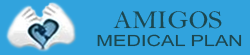
<style>
.page{position:relative;width:250px;height:55px;background:#31a3dd}
.page>*{position:absolute;margin:0}
.t1{font:25.7px "BellMT";color:#1c474f;scale:1.06 1}
.t2{font:15.4px "ArialMT";color:#1c474f;scale:1.3 1}
</style>
<div class="page">
<p class="t1" style="left:113px;top:11px;width:109px;height:18px">AMIGOS</p>
<p class="t2" style="left:97px;top:34px;width:145px;height:13px">MEDICAL PLAN</p>
</div>
